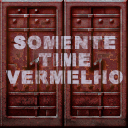
<style>
.page{position:relative;width:128px;height:128px}
.page>*{position:absolute;margin:0}
.t1{font:17.3px/17.3px "Arial-Black";letter-spacing:0.04em;text-transform:uppercase;font-weight:bold}
</style>
<div class="page">
<p class="t1" style="left:6px;top:35px;width:117px;height:49px;text-align:center">Somente<br>time<br>vermelho</p>
</div>
